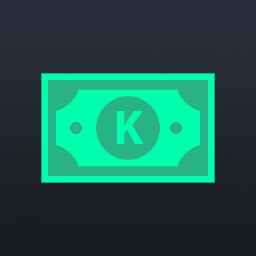
<style>
.page{position:relative;width:256px;height:256px}
.page>*{position:absolute;margin:0}
.t1{font:48px "MyriadPro-Bold";color:#00ffad}
</style>
<div class="page">
<p class="t1" style="left:117px;top:111px;width:27px;height:33px">K</p>
</div>
